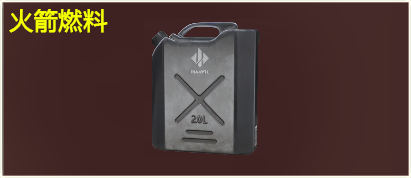
<style>
.page{position:relative;width:411px;height:178px}
.page>*{position:absolute;margin:0}
.t1{font:24px "MicrosoftYaHei";color:#f4ff00;font-weight:bold}
</style>
<div class="page">
<p class="t1" style="left:9px;top:9px;width:99px;height:24px">火箭燃料</p>
</div>
